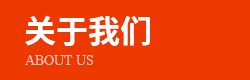
<style>
.page{position:relative;width:250px;height:80px;background:#ed3900}
.page>*{position:absolute;margin:0}
.t1{font:32px "SourceHanSansCN-Bold";color:#ffffff;text-transform:uppercase}
.t2{font:14px "TimesNewRomanPSMT";color:#f8c0b8;text-transform:uppercase}
</style>
<div class="page">
<p class="t1" style="left:25px;top:15px;width:125px;height:31px">关于我们</p>
<p class="t2" style="left:25px;top:55px;width:68px;height:10px">ABOUT US</p>
</div>
